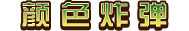
<style>
.page{position:relative;width:189px;height:31px;background:#ffffff}
.page>*{position:absolute;margin:0}
.t1{font:27px "JZhongYi";letter-spacing:0.3em;scale:1.11 1}
</style>
<div class="page">
<p class="t1" style="left:22px;top:2px;width:145px;height:25px">颜色炸弹</p>
</div>
